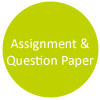
<style>
.page{position:relative;width:100px;height:100px;background:#c0d100}
.page>*{position:absolute;margin:0}
.t1{font:14px "Calibri";color:#ffffff}
</style>
<div class="page">
<p class="t1" style="left:7px;top:38px;width:87px;height:30px;text-align:center">Assignment &amp;<br>Question Paper</p>
</div>
